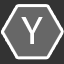
<style>
.page{position:relative;width:64px;height:64px;background:#676767}
.page>*{position:absolute;margin:0}
.t1{font:36px "BellGothicStd-Bold";color:#ffffff}
</style>
<div class="page">
<p class="t1" style="left:21px;top:17px;width:22px;height:27px">Y</p>
</div>
